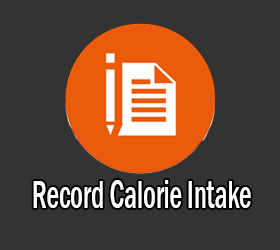
<style>
.page{position:relative;width:280px;height:250px;background:#333333}
.page>*{position:absolute;margin:0}
.t1{font:40.7px "FranklinGothic-MediumCond";color:#ffffff;scale:0.68 1}
</style>
<div class="page">
<p class="t1" style="left:33px;top:180px;width:218px;height:28px">Record Calorie Intake</p>
</div>
